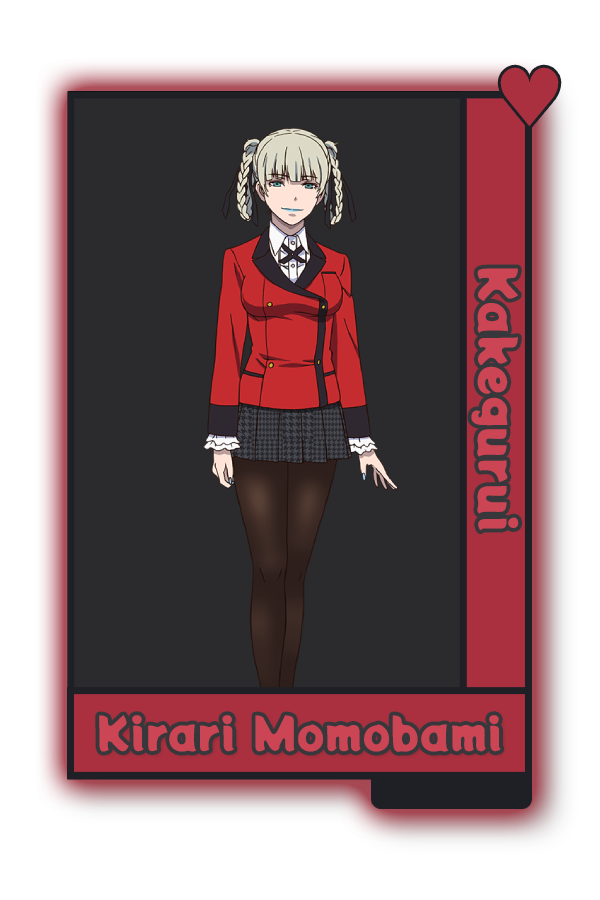
<style>
.page{position:relative;width:600px;height:900px;background:#2b2a2d}
.page>*{position:absolute;margin:0}
.t1{font:80px "DejaVuSans";color:#ab303f}
.t2{font:50px "PottaOne-Regular";color:#cb4554}
.t3{font:45px "PottaOne-Regular";color:#cb4554}
</style>
<div class="page">
<p class="t1" style="left:500px;top:67px;width:59px;height:59px">♥</p>
<p class="t2" style="left:471px;top:268px;width:48px;height:263px;rotate:90deg">Kakegurui</p>
<p class="t3" style="left:99px;top:715px;width:402px;height:37px">Kirari Momobami</p>
</div>
